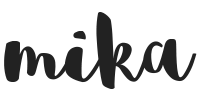
<style>
.page{position:relative;width:200px;height:100px;background:#ffffff}
.page>*{position:absolute;margin:0}
.t1{font:150px "Sophia";color:#222222}
</style>
<div class="page">
<p class="t1" style="left:4px;top:12px;width:193px;height:77px">mika</p>
</div>
